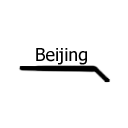
<style>
.page{position:relative;width:128px;height:128px;background:#ffffff}
.page>*{position:absolute;margin:0}
.t1{font:17.9px "Tahoma";color:#000000}
</style>
<div class="page">
<p class="t1" style="left:36px;top:48px;width:51px;height:17px">Beijing</p>
</div>
